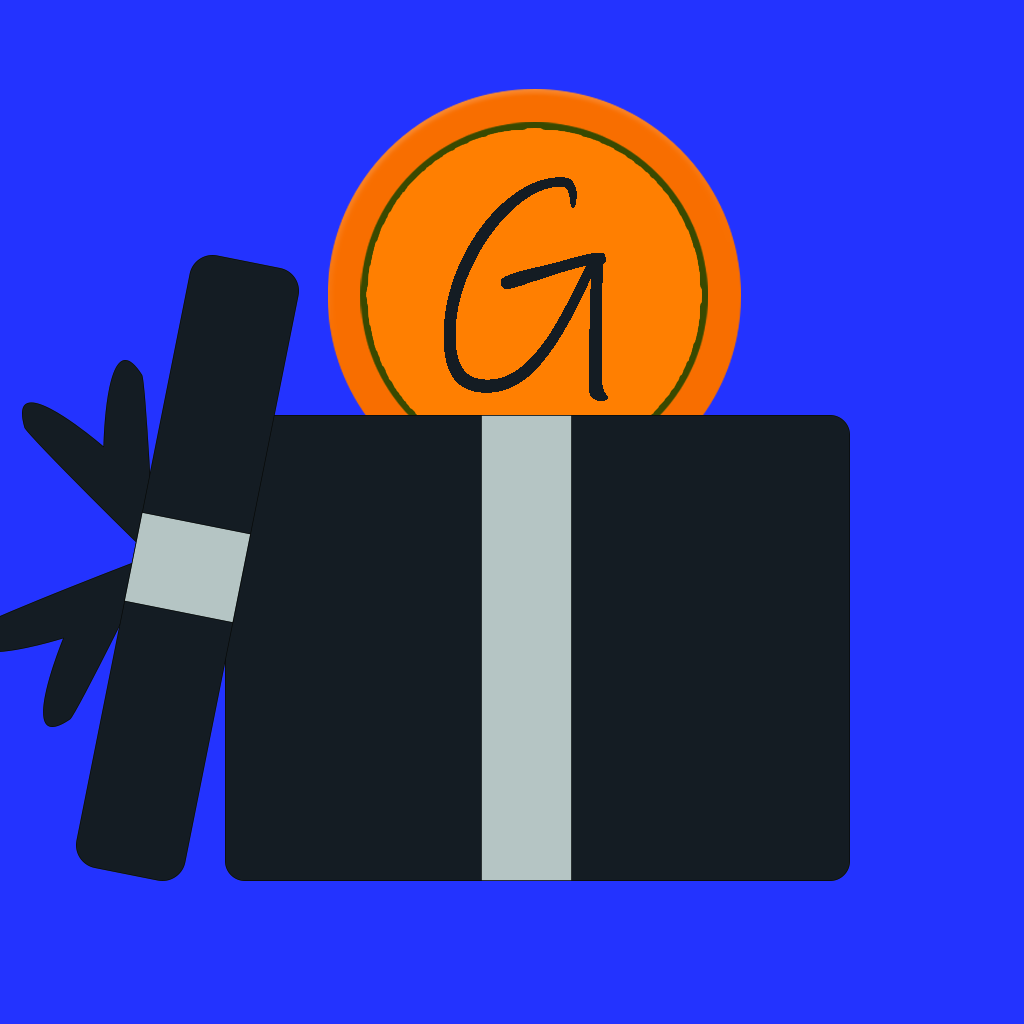
<style>
.page{position:relative;width:1024px;height:1024px;background:#2333ff}
.page>*{position:absolute;margin:0}
.t1{font:253.3px "InkFree";color:#141d23}
</style>
<div class="page">
<p class="t1" style="left:444px;top:177px;width:164px;height:224px">G</p>
</div>
